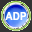
<style>
.page{position:relative;width:32px;height:32px;background:#333333}
.page>*{position:absolute;margin:0}
.t1{font:11px "Arial-BoldMT";color:#ffffff;scale:0.91 1}
</style>
<div class="page">
<p class="t1" style="left:5px;top:12px;width:22px;height:8px">ADP</p>
</div>
